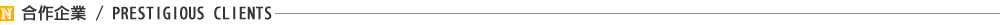
<style>
.page{position:relative;width:1000px;height:25px;background:#ffffff}
.page>*{position:absolute;margin:0}
.t1{font:16px "AdobeFanHeitiStd-Bold";color:#343434;font-weight:bold}
</style>
<div class="page">
<p class="t1" style="left:21px;top:5px;width:251px;height:16px">合作企業 / PRESTIGIOUS CLIENTS</p>
</div>
